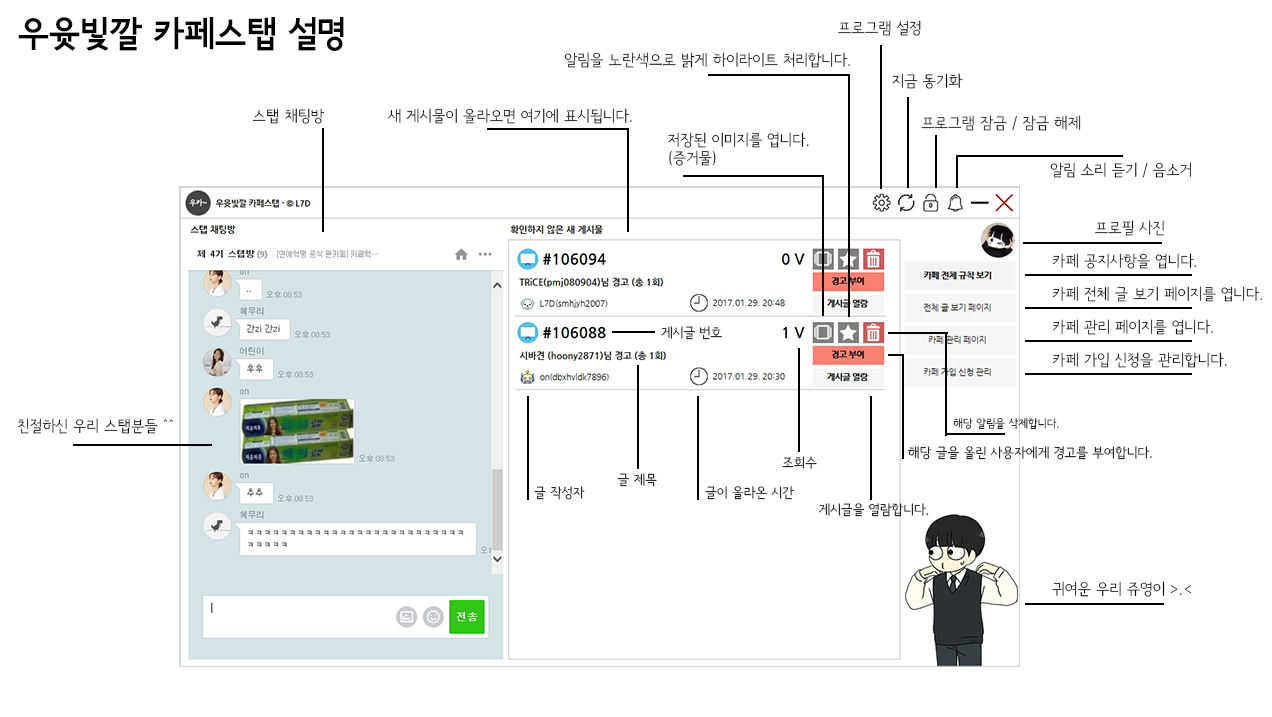
<style>
.page{position:relative;width:1272px;height:717px;background:#ffffff}
.page>*{position:absolute;margin:0}
.t1{font:35.6px "SeoulNamsanEB";color:#000000}
.t2{font:15.4px "SeoulNamsanL";color:#000000}
.t3{font:13.5px "SeoulNamsanL"}
.t4{font:11.2px "SeoulNamsanL"}
.t5{font:13.5px "SeoulNamsanL";color:#000000}
</style>
<div class="page">
<p class="t1" style="left:18px;top:17px;width:326px;height:34px">우윳빛깔 카페스탭 설명</p>
<p class="t2" style="left:838px;top:20px;width:83px;height:16px">프로그램 설정</p>
<p class="t2" style="left:564px;top:52px;width:286px;height:16px">알림을 노란색으로 밝게 하이라이트 처리합니다.</p>
<p class="t2" style="left:892px;top:73px;width:71px;height:16px">지금 동기화</p>
<p class="t2" style="left:252px;top:108px;width:73px;height:16px">스탭 채팅방</p>
<p class="t2" style="left:388px;top:108px;width:244px;height:16px">새 게시물이 올라오면 여기에 표시됩니다.</p>
<p class="t2" style="left:921px;top:115px;width:160px;height:16px">프로그램 잠금 / 잠금 해제</p>
<p class="t2" style="left:668px;top:132px;width:141px;height:34px">저장된 이미지를 엽니다.<br>(증거물)</p>
<p class="t2" style="left:1050px;top:162px;width:141px;height:16px">알림 소리 듣기 / 음소거</p>
<p class="t2" style="left:1095px;top:220px;width:69px;height:16px">프로필 사진</p>
<p class="t2" style="left:1052px;top:253px;width:145px;height:16px">카페 공지사항을 엽니다.</p>
<p class="t2" style="left:1052px;top:286px;width:210px;height:16px">카페 전체 글 보기 페이지를 엽니다.</p>
<p class="t3" style="left:661px;top:326px;width:61px;height:14px">게시글 번호</p>
<p class="t2" style="left:1052px;top:319px;width:161px;height:16px">카페 관리 페이지를 엽니다.</p>
<p class="t2" style="left:1052px;top:352px;width:175px;height:16px">카페 가입 신청을 관리합니다.</p>
<p class="t2" style="left:17px;top:418px;width:156px;height:16px">친절하신 우리 스탭분들 ^^</p>
<p class="t4" style="left:953px;top:418px;width:106px;height:11px">해당 알림을 삭제합니다.</p>
<p class="t5" style="left:908px;top:446px;width:244px;height:14px">해당 글을 올린 사용자에게 경고를 부여합니다.</p>
<p class="t3" style="left:782px;top:456px;width:35px;height:13px">조회수</p>
<p class="t3" style="left:617px;top:473px;width:40px;height:14px">글 제목</p>
<p class="t3" style="left:534px;top:486px;width:51px;height:14px">글 작성자</p>
<p class="t3" style="left:705px;top:486px;width:89px;height:14px">글이 올라온 시간</p>
<p class="t3" style="left:818px;top:503px;width:111px;height:14px">게시글을 열람합니다.</p>
<p class="t2" style="left:1052px;top:581px;width:140px;height:16px">귀여운 우리 쥬영이 &gt;.&lt;</p>
</div>
